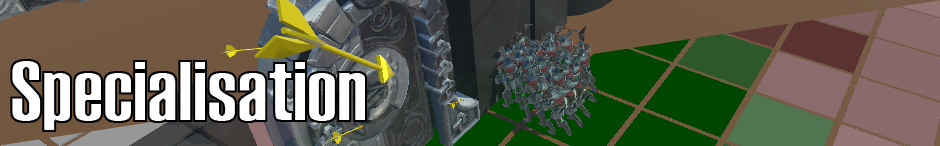
<style>
.page{position:relative;width:940px;height:146px}
.page>*{position:absolute;margin:0}
.t1{font:85px "Haettenschweiler";color:#ffffff}
</style>
<div class="page">
<p class="t1" style="left:11px;top:60px;width:355px;height:71px">Specialisation</p>
</div>
